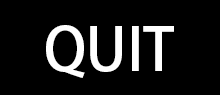
<style>
.page{position:relative;width:220px;height:95px;background:#000000}
.page>*{position:absolute;margin:0}
.t1{font:58.3px "AdobeFanHeitiStd-Bold";color:#ffffff}
</style>
<div class="page">
<p class="t1" style="left:46px;top:25px;width:128px;height:53px">QUIT</p>
</div>
